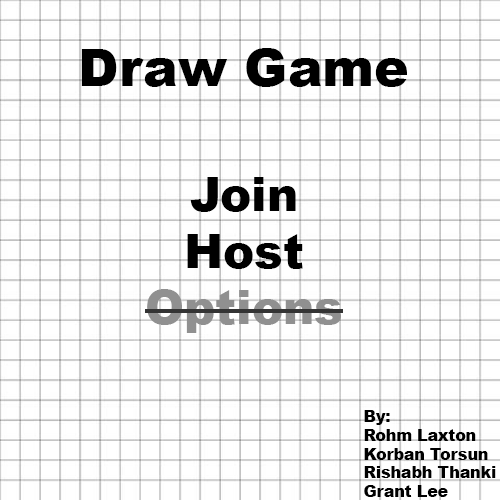
<style>
.page{position:relative;width:500px;height:500px;background:#ffffff}
.page>*{position:absolute;margin:0}
.t1{font:52.1px "Arial-Black";color:#000000}
.t2{font:46.9px "Arial-Black";color:#000000}
.t3{font:46.9px "Arial-Black";color:#909090}
.t4{font:15.6px "Arial-Black";color:#000000}
</style>
<div class="page">
<p class="t1" style="left:81px;top:48px;width:326px;height:39px">Draw Game</p>
<p class="t2" style="left:147px;top:177px;width:194px;height:156px;text-align:center">Join<br>Host<br><span class="t3">Options</span></p>
<p class="t4" style="left:364px;top:410px;width:132px;height:87px">By: <br>Rohm Laxton<br>Korban Torsun<br>Rishabh Thanki<br>Grant Lee</p>
</div>
